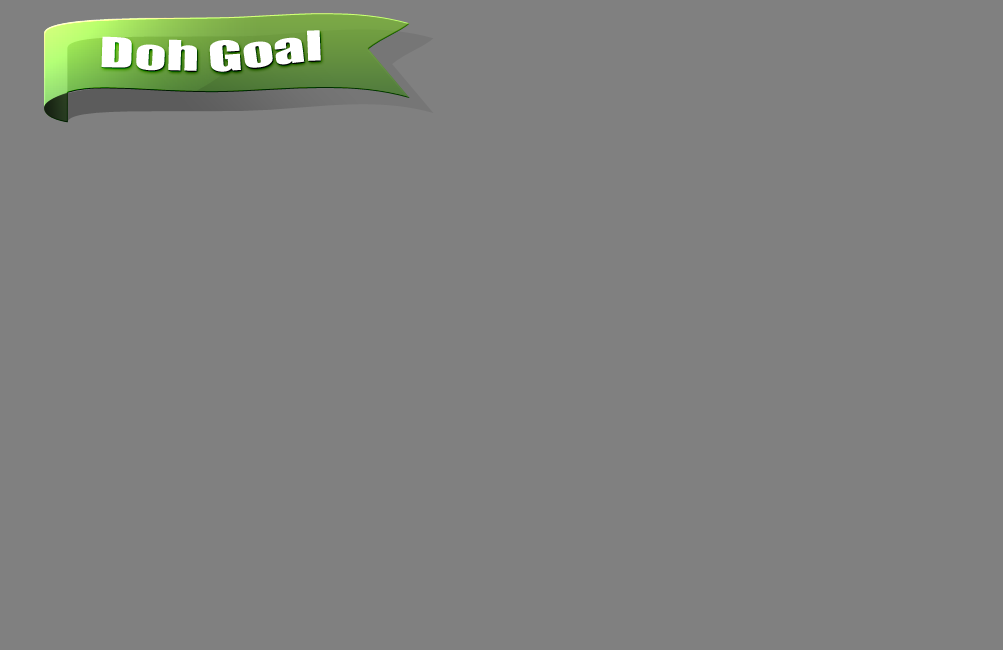
<style>
.page{position:relative;width:1003px;height:650px;background:#808080}
.page>*{position:absolute;margin:0}
.t1{font:38.4px "Impact";color:#ffffff;scale:1.63 1}
</style>
<div class="page">
<p class="t1" style="left:101px;top:30px;width:220px;height:42px">Doh Goal</p>
</div>
